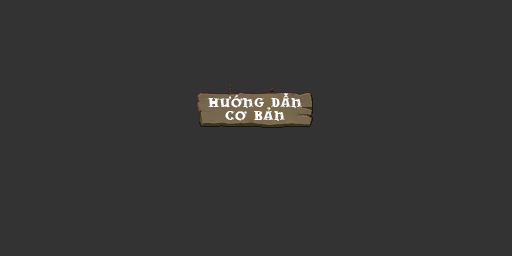
<style>
.page{position:relative;width:512px;height:256px;background:#333333}
.page>*{position:absolute;margin:0}
.t1{font:16px/13.3px "drwnstcr";color:#ffffff}
</style>
<div class="page">
<p class="t1" style="left:208px;top:93px;width:94px;height:28px;text-align:center">Hướng Dẫn<br>cơ Bản</p>
</div>
